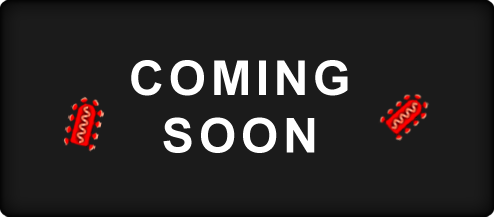
<style>
.page{position:relative;width:494px;height:217px;background:#1b1b1b}
.page>*{position:absolute;margin:0}
.t1{font:48px "Arial-BoldMT";letter-spacing:0.1em;color:#ffffff}
</style>
<div class="page">
<p class="t1" style="left:131px;top:60px;width:217px;height:93px;text-align:center">COMING<br>SOON</p>
</div>
